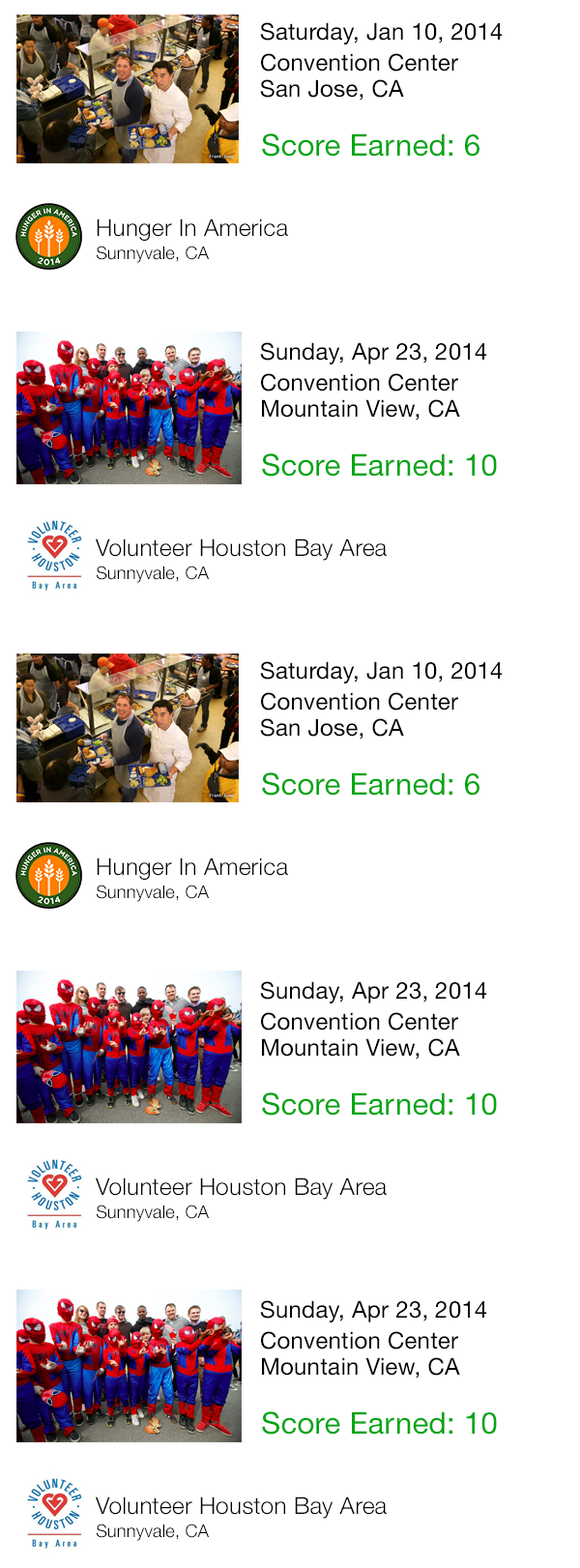
<style>
.page{position:relative;width:580px;height:1568px;background:#ffffff}
.page>*{position:absolute;margin:0}
.t1{font:23.2px "HelveticaNeue";letter-spacing:0.01em;color:#000000}
.t2{font:30px "HelveticaNeue";letter-spacing:0.01em;color:#00a613}
.t3{font:23.5px "HelveticaNeue-Light";letter-spacing:0.01em;color:#000000}
.t4{font:17.6px "HelveticaNeue-Light";letter-spacing:0.01em;color:#000000}
</style>
<div class="page">
<p class="t1" style="left:260px;top:22px;width:243px;height:22px">Saturday, Jan 10, 2014</p>
<p class="t1" style="left:261px;top:53px;width:197px;height:19px">Convention Center</p>
<p class="t1" style="left:260px;top:79px;width:144px;height:22px">San Jose, CA</p>
<p class="t2" style="left:262px;top:133px;width:217px;height:24px">Score Earned: 6</p>
<p class="t3" style="left:97px;top:218px;width:191px;height:23px">Hunger In America</p>
<p class="t4" style="left:97px;top:246px;width:113px;height:17px">Sunnyvale, CA</p>
<p class="t1" style="left:260px;top:342px;width:227px;height:22px">Sunday, Apr 23, 2014</p>
<p class="t1" style="left:261px;top:373px;width:197px;height:19px">Convention Center</p>
<p class="t1" style="left:262px;top:399px;width:198px;height:22px">Mountain View, CA</p>
<p class="t2" style="left:262px;top:453px;width:235px;height:24px">Score Earned: 10</p>
<p class="t3" style="left:95px;top:538px;width:292px;height:23px">Volunteer Houston Bay Area</p>
<p class="t4" style="left:97px;top:566px;width:113px;height:17px">Sunnyvale, CA</p>
<p class="t1" style="left:260px;top:661px;width:243px;height:22px">Saturday, Jan 10, 2014</p>
<p class="t1" style="left:261px;top:692px;width:197px;height:19px">Convention Center</p>
<p class="t1" style="left:260px;top:718px;width:144px;height:22px">San Jose, CA</p>
<p class="t2" style="left:262px;top:772px;width:217px;height:24px">Score Earned: 6</p>
<p class="t3" style="left:97px;top:857px;width:191px;height:23px">Hunger In America</p>
<p class="t4" style="left:97px;top:885px;width:113px;height:17px">Sunnyvale, CA</p>
<p class="t1" style="left:260px;top:981px;width:227px;height:22px">Sunday, Apr 23, 2014</p>
<p class="t1" style="left:261px;top:1012px;width:197px;height:19px">Convention Center</p>
<p class="t1" style="left:262px;top:1038px;width:198px;height:22px">Mountain View, CA</p>
<p class="t2" style="left:262px;top:1092px;width:235px;height:24px">Score Earned: 10</p>
<p class="t3" style="left:95px;top:1177px;width:292px;height:23px">Volunteer Houston Bay Area</p>
<p class="t4" style="left:97px;top:1205px;width:113px;height:17px">Sunnyvale, CA</p>
<p class="t1" style="left:260px;top:1300px;width:227px;height:22px">Sunday, Apr 23, 2014</p>
<p class="t1" style="left:261px;top:1331px;width:197px;height:19px">Convention Center</p>
<p class="t1" style="left:262px;top:1357px;width:198px;height:22px">Mountain View, CA</p>
<p class="t2" style="left:262px;top:1411px;width:235px;height:24px">Score Earned: 10</p>
<p class="t3" style="left:95px;top:1496px;width:292px;height:23px">Volunteer Houston Bay Area</p>
<p class="t4" style="left:97px;top:1524px;width:113px;height:17px">Sunnyvale, CA</p>
</div>
